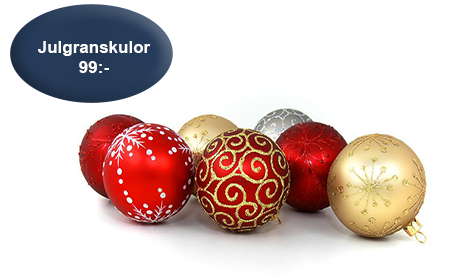
<style>
.page{position:relative;width:456px;height:276px;background:#ffffff}
.page>*{position:absolute;margin:0}
.t1{font:17px "Arial-BoldMT";color:#ffffff}
</style>
<div class="page">
<p class="t1" style="left:38px;top:41px;width:113px;height:32px;text-align:center">Julgranskulor<br>99:-</p>
</div>
